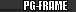
<style>
.page{position:relative;width:76px;height:12px;background:#333333}
.page>*{position:absolute;margin:0}
.t1{font:11px "Impact";color:#ffffff}
</style>
<div class="page">
<p class="t1" style="left:24px;top:1px;width:43px;height:9px">PG-FRAME</p>
</div>
